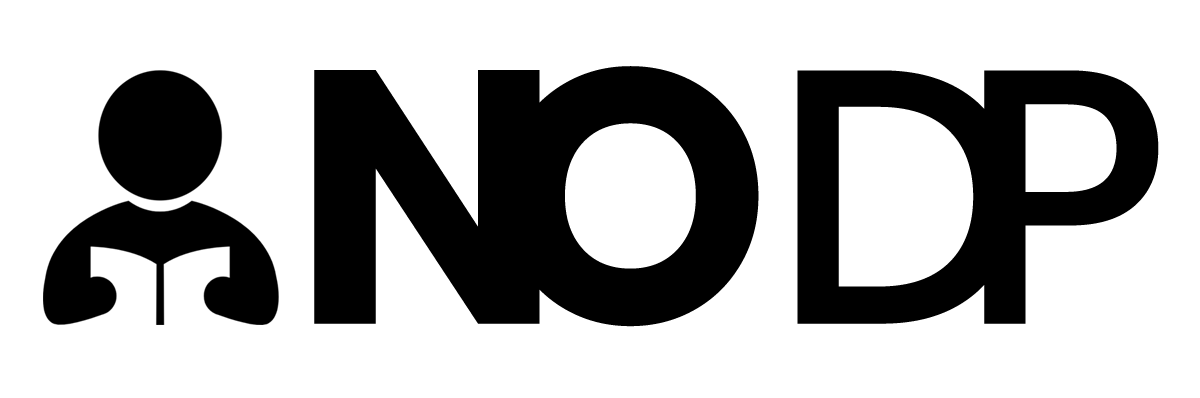
<style>
.page{position:relative;width:1200px;height:398px;background:#ffffff}
.page>*{position:absolute;margin:0}
.t1{font:358.3px "Poppins-Bold";letter-spacing:-0.2em;color:#000000}
.t2{font:358.3px "Poppins-Medium";letter-spacing:-0.2em;color:#000000}
</style>
<div class="page">
<p class="t1" style="left:314px;top:66px;width:845px;height:261px">NO     <span class="t2">      DP</span></p>
</div>
